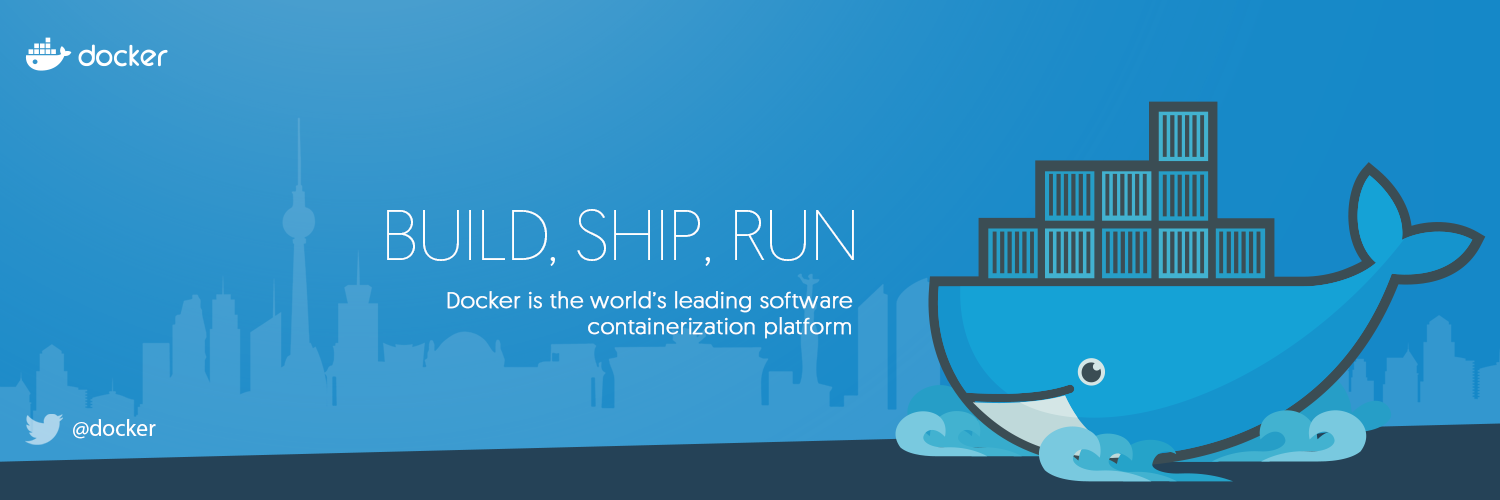
<style>
.page{position:relative;width:1500px;height:500px}
.page>*{position:absolute;margin:0}
.t1{font:72px "Geomanist-ExtraLight";letter-spacing:-0.025em;color:#ffffff}
.t2{font:22.9px/26.2px "Geomanist-Light";letter-spacing:0.005em;color:#ffffff;font-weight:bold}
.t3{font:23px "MyriadPro-Regular";letter-spacing:0.005em;color:#ffffff}
</style>
<div class="page">
<p class="t1" style="left:387px;top:209px;width:467px;height:57px">BUILD, SHIP, RUN</p>
<p class="t2" style="left:447px;top:291px;width:406px;height:48px;text-align:right">Docker is the world’s leading software<br>containerization platform</p>
<p class="t3" style="left:73px;top:419px;width:83px;height:20px">@docker</p>
</div>
